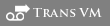
<style>
.page{position:relative;width:110px;height:26px;background:#808080}
.page>*{position:absolute;margin:0}
.t1{font:12px "TrajanPro-Bold";color:#ffffff;scale:1.05 1}
</style>
<div class="page">
<p class="t1" style="left:33px;top:8px;width:69px;height:9px">Trans VM</p>
</div>
